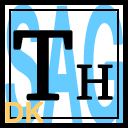
<style>
.page{position:relative;width:128px;height:128px;background:#000000}
.page>*{position:absolute;margin:0}
.t1{font:174px "Shruti-Bold";color:#66ccff;font-weight:bold;scale:0.34 1}
.t2{font:100px "Sylfaen";color:#000000;font-weight:bold}
.t3{font:50px "Sylfaen";color:#000000;font-weight:bold}
.t4{font:30px "Shruti-Bold";color:#ffcc66;font-weight:bold}
</style>
<div class="page">
<p class="t1" style="left:5px;top:4px;width:119px;height:122px">SAG</p>
<p class="t2" style="left:13px;top:30px;width:100px;height:71px">T<span class="t3">H</span></p>
<p class="t4" style="left:5px;top:102px;width:39px;height:21px">DK</p>
</div>
